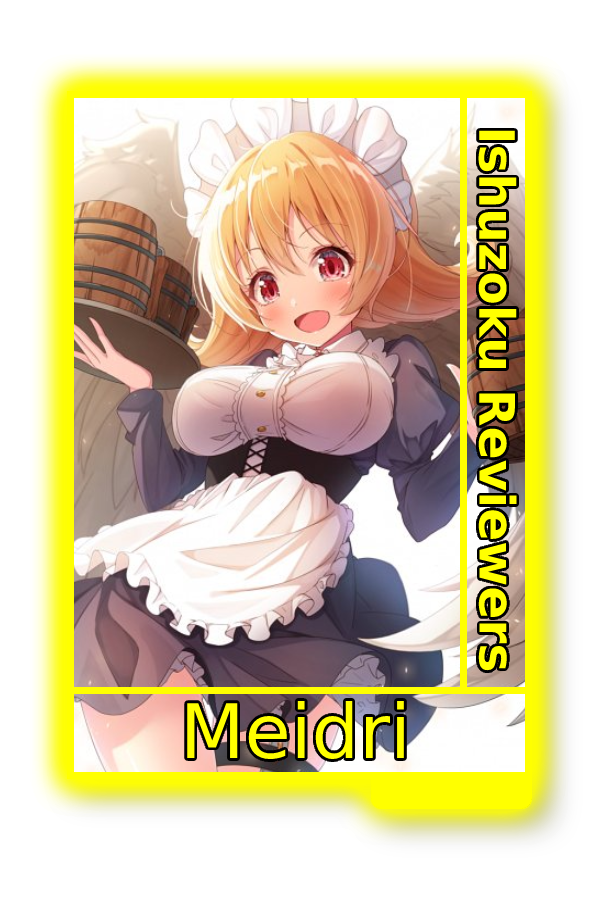
<style>
.page{position:relative;width:600px;height:900px;background:#ffffff}
.page>*{position:absolute;margin:0}
.t1{font:48.8px "MADETOMMY-Bold";color:#ffff00}
.t2{font:75px "CoolveticaRg-Regular";color:#ffff00}
</style>
<div class="page">
<p class="t1" style="left:478px;top:130px;width:39px;height:541px;rotate:90deg">Ishuzoku Reviewers</p>
<p class="t2" style="left:187px;top:701px;width:217px;height:59px">Meidri</p>
</div>
